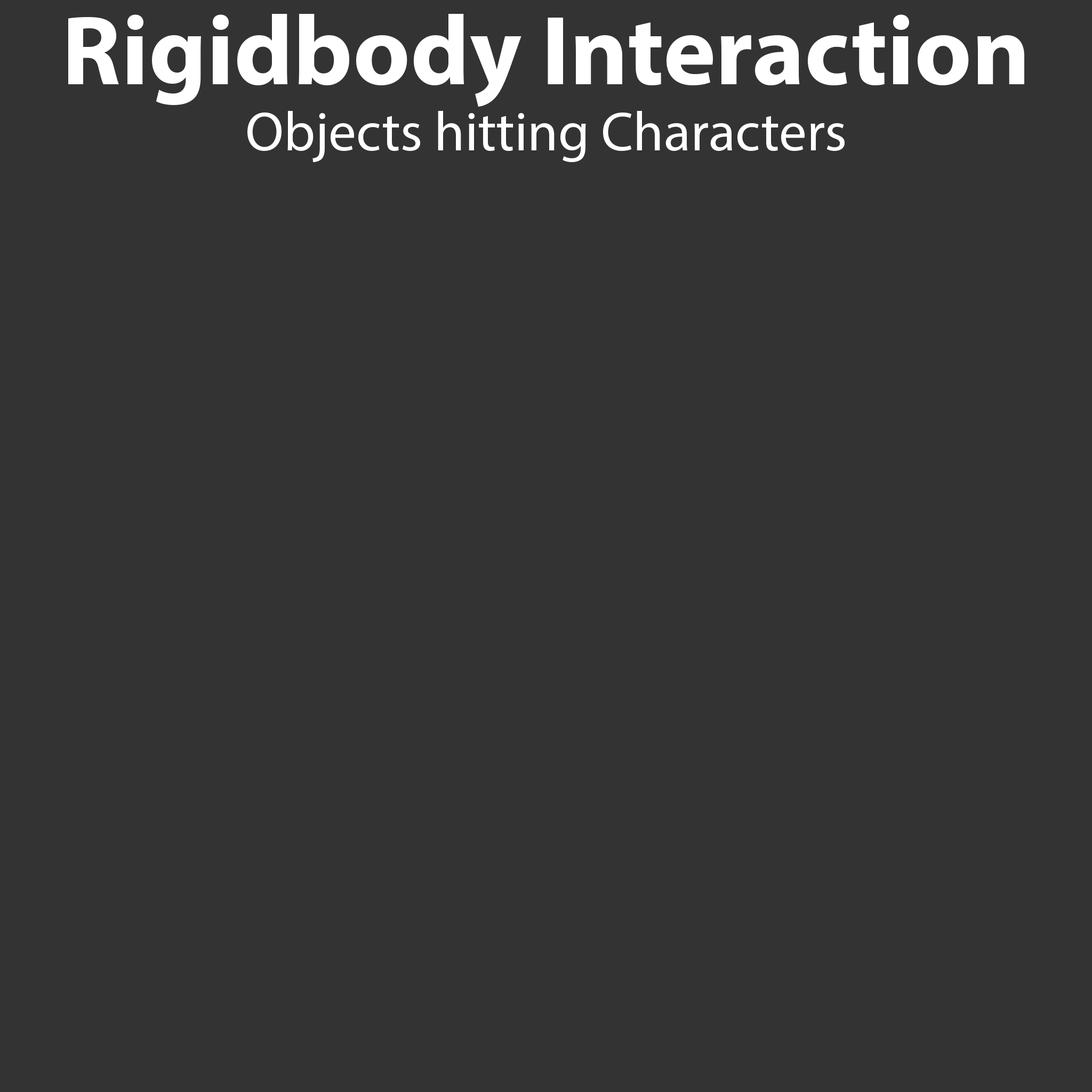
<style>
.page{position:relative;width:1092px;height:1092px;background:#333333}
.page>*{position:absolute;margin:0}
.t1{font:55.5px "MyriadPro-Regular";color:#ffffff}
.t2{font:99.2px "MyriadPro-Bold";color:#ffffff}
</style>
<div class="page">
<p class="t1" style="left:68px;top:14px;width:956px;height:148px;text-align:center"><span class="t2">Rigidbody Interaction<br></span>Objects hitting Characters</p>
</div>
